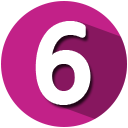
<style>
.page{position:relative;width:128px;height:128px;background:#ffffff}
.page>*{position:absolute;margin:0}
.t1{font:100px "MicrosoftYaHei";color:#ffffff}
</style>
<div class="page">
<p class="t1" style="left:38px;top:24px;width:50px;height:78px">6</p>
</div>
